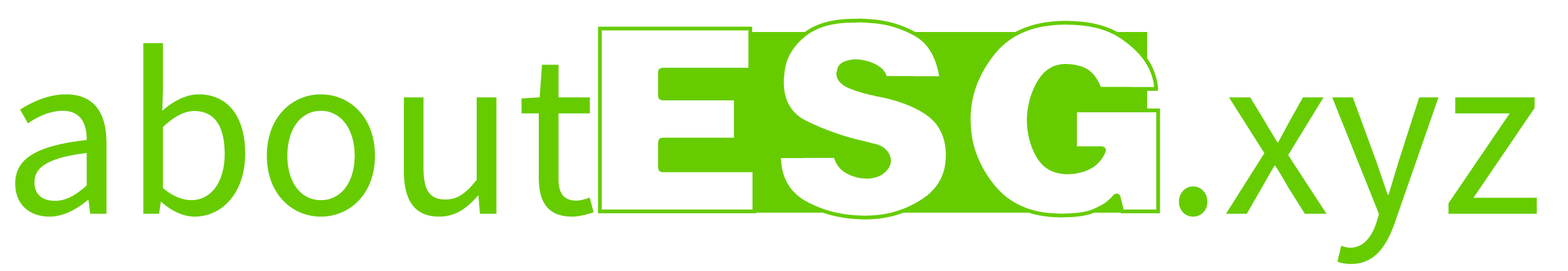
<style>
.page{position:relative;width:1568px;height:271px;background:#ffffff}
.page>*{position:absolute;margin:0}
.t1{font:292px "Helvetica-Black-SemiBold";color:#ffffff}
.t2{font:214.1px "Helvetica";color:#66cc00}
.t3{font:214.1px "NotoSansHans-Regular";color:#66cc00}
</style>
<div class="page">
<p class="t1" style="left:598px;top:18px;width:562px;height:202px"><span class="t2">         </span>ESG</p>
<p class="t3" style="left:15px;top:43px;width:1522px;height:221px">about          .xyz</p>
</div>
